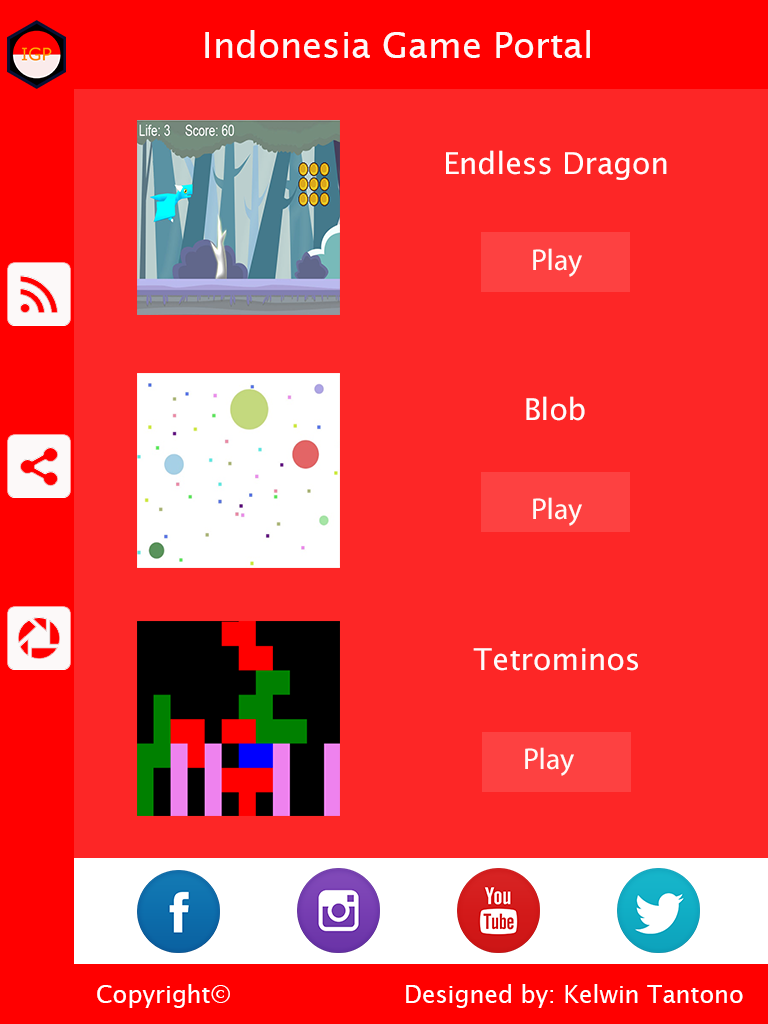
<style>
.page{position:relative;width:768px;height:1024px;background:#fd2626}
.page>*{position:absolute;margin:0}
.t1{font:36px "LucidaSans";color:#fcf8f8}
.t2{font:30px "LucidaSans";color:#fffdfd}
.t3{font:30px "MyriadPro-Regular";color:#fefaf8}
.t4{font:30px "LucidaSans";color:#fdfcfc}
.t5{font:24px "LucidaSans";color:#ffffff}
</style>
<div class="page">
<p class="t1" style="left:205px;top:30px;width:385px;height:28px">Indonesia Game Portal</p>
<p class="t2" style="left:446px;top:150px;width:221px;height:30px">Endless Dragon</p>
<p class="t3" style="left:533px;top:248px;width:49px;height:29px">Play</p>
<p class="t4" style="left:526px;top:396px;width:59px;height:25px">Blob</p>
<p class="t3" style="left:533px;top:497px;width:49px;height:29px">Play</p>
<p class="t4" style="left:473px;top:648px;width:165px;height:23px">Tetrominos</p>
<p class="t3" style="left:525px;top:747px;width:49px;height:29px">Play</p>
<p class="t5" style="left:97px;top:984px;width:133px;height:24px">Copyright©</p>
<p class="t5" style="left:406px;top:984px;width:337px;height:24px">Designed by: Kelwin Tantono</p>
</div>
